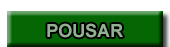
<style>
.page{position:relative;width:170px;height:47px;background:#046704}
.page>*{position:absolute;margin:0}
.t1{font:18px "Arial-BoldMT";color:#92b192}
</style>
<div class="page">
<p class="t1" style="left:47px;top:23px;width:76px;height:15px">POUSAR</p>
</div>
